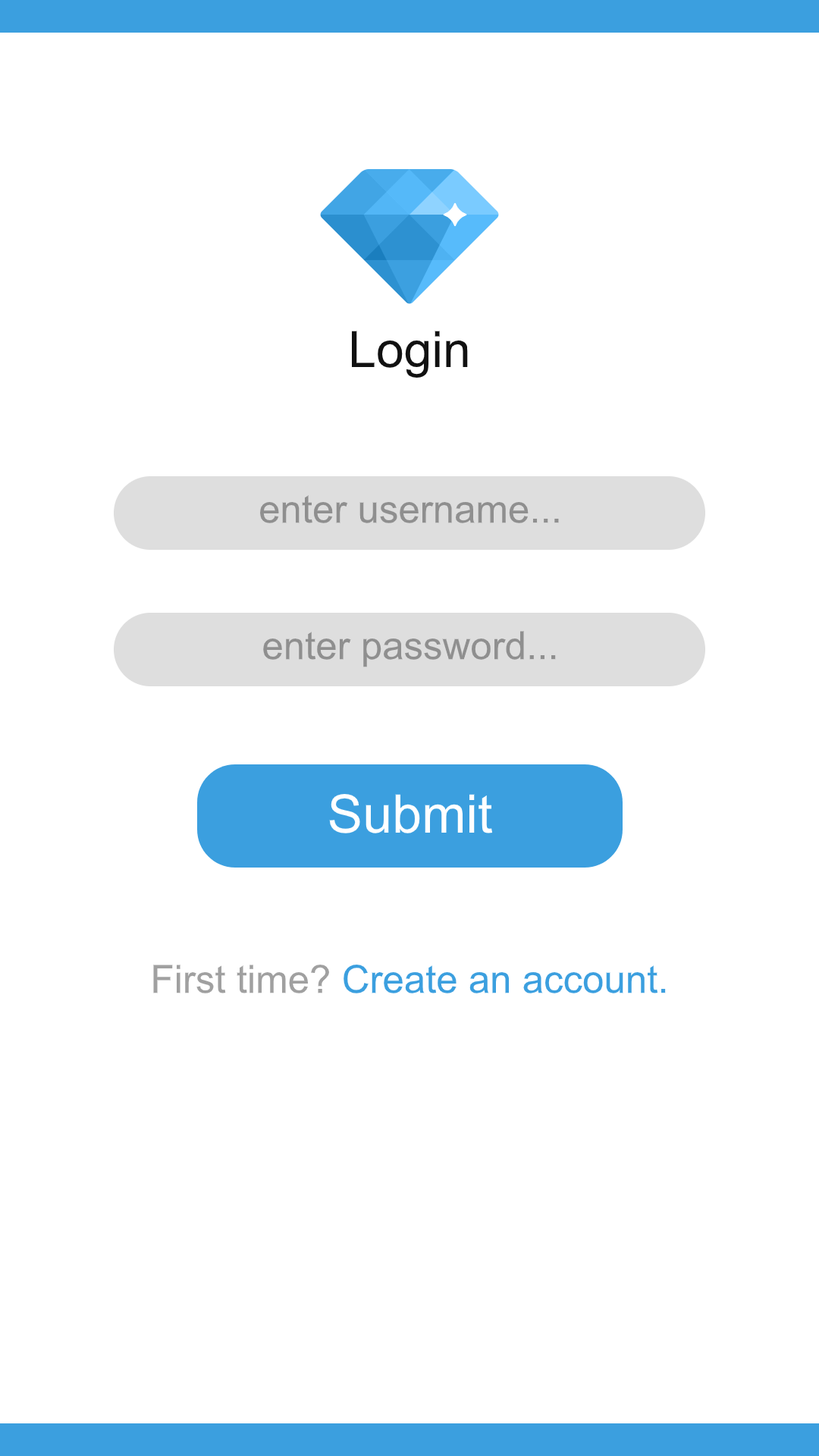
<style>
.page{position:relative;width:819px;height:1456px;background:#ffffff}
.page>*{position:absolute;margin:0}
.t1{font:50px "ArialMT";color:#111111}
.t2{font:38.7px "ArialMT";color:#8f8f8f}
.t3{font:53.1px "ArialMT";color:#ffffff}
.t4{font:38.7px "ArialMT";color:#3b9fdf}
.t5{font:38.7px "ArialMT";color:#a0a0a0}
</style>
<div class="page">
<p class="t1" style="left:352px;top:331px;width:116px;height:47px">Login</p>
<p class="t2" style="left:260px;top:495px;width:299px;height:28px">enter username...</p>
<p class="t2" style="left:263px;top:631px;width:293px;height:36px">enter password...</p>
<p class="t3" style="left:329px;top:794px;width:163px;height:39px">Submit</p>
<p class="t4" style="left:153px;top:965px;width:513px;height:28px"><span class="t5">First time? </span>Create an account.</p>
</div>
